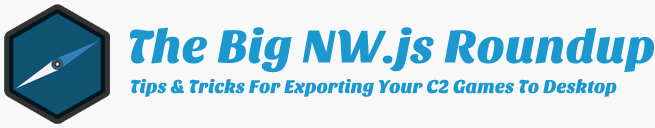
<style>
.page{position:relative;width:655px;height:128px;background:#f8f8f8}
.page>*{position:absolute;margin:0}
.t1{font:48px "SansitaOne";color:#1c98d1}
.t2{font:19px "SansitaOne";color:#1c98d1}
</style>
<div class="page">
<p class="t1" style="left:130px;top:27px;width:524px;height:46px">The Big NW.js Roundup</p>
<p class="t2" style="left:131px;top:78px;width:486px;height:19px">Tips &amp; Tricks For Exporting Your C2 Games To Desktop</p>
</div>
